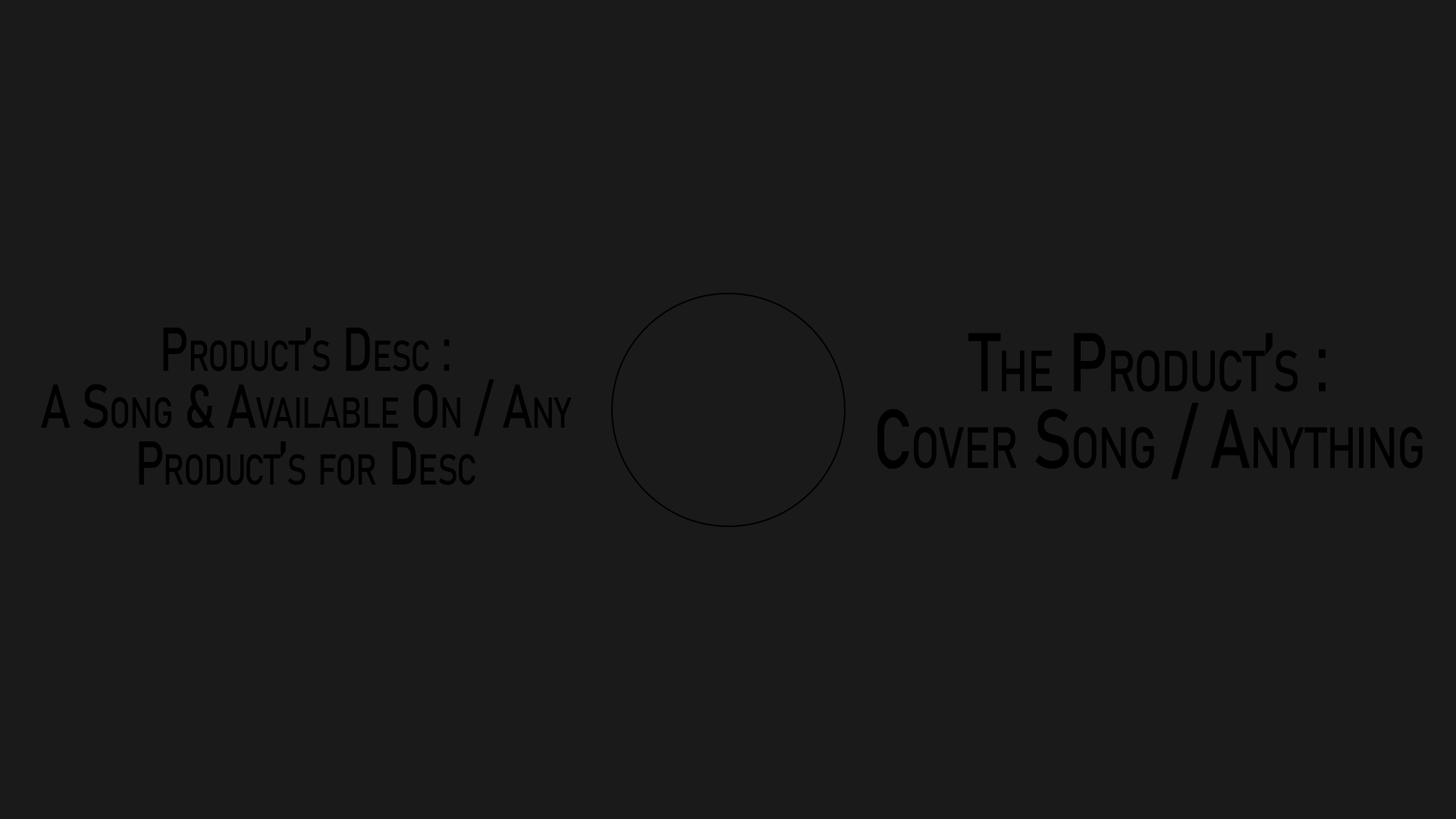
<style>
.page{position:relative;width:1456px;height:819px;background:#1a1a1a}
.page>*{position:absolute;margin:0}
.t1{font:60.8px "Bahnschrift";letter-spacing:-0.025em;color:#000000;font-variant:small-caps;scale:0.78 1}
.t2{font:81.8px "Bahnschrift";letter-spacing:-0.025em;color:#000000;font-variant:small-caps;scale:0.78 1}
</style>
<div class="page">
<p class="t1" style="left:41px;top:328px;width:531px;height:157px;text-align:center">Product’s Desc :<br>A Song &amp; Available On / Any<br>Product’s for Desc</p>
<p class="t2" style="left:877px;top:333px;width:546px;height:146px;text-align:center">The Product’s :<br>Cover Song / Anything</p>
</div>
